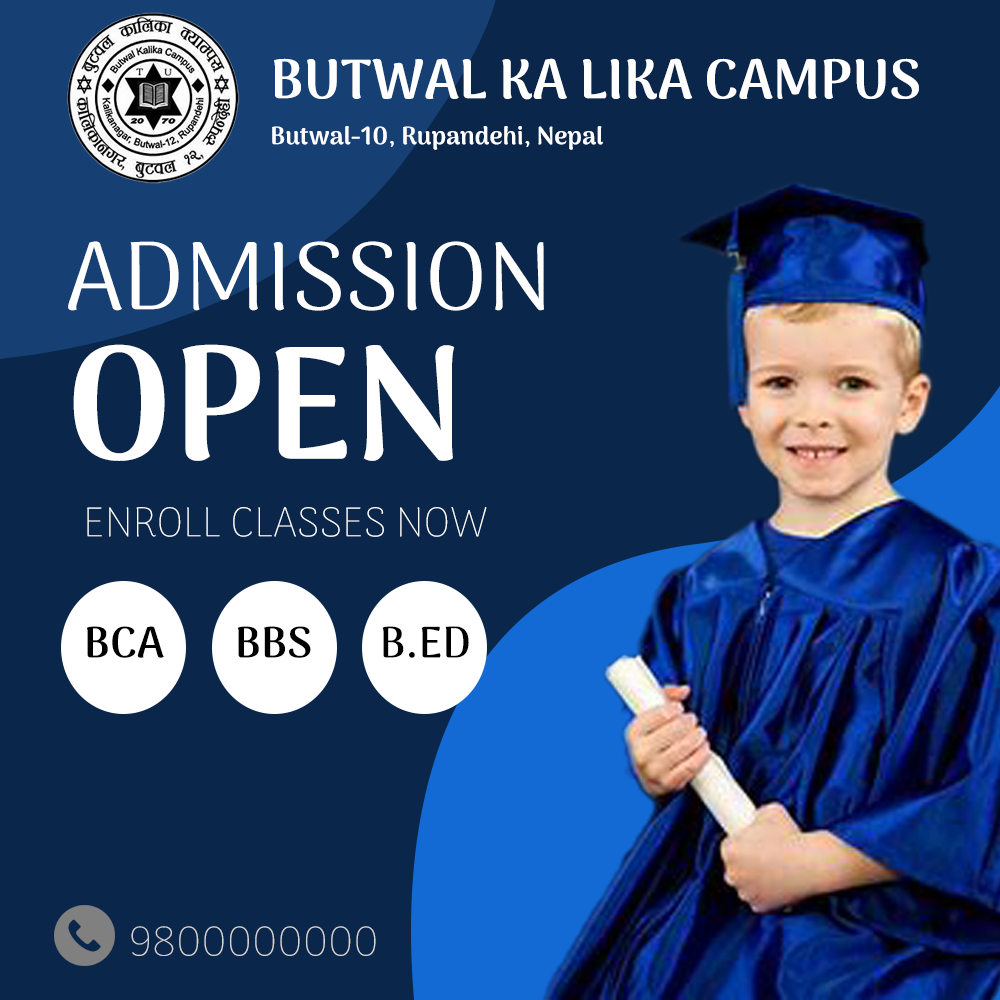
<style>
.page{position:relative;width:1000px;height:1000px;background:#0a274b}
.page>*{position:absolute;margin:0}
.t1{font:25px/45.8px "ArimaMadurai-Black";color:#ffffff}
.t2{font:55.4px/45.8px "ArimaMadurai-Black";color:#ffffff}
.t3{font:95.9px/149.2px "ArimaMadurai-Regular";color:#ffffff}
.t4{font:159.9px/149.2px "ArimaMadurai-Black";color:#ffffff}
.t5{font:41.7px "ArimaMadurai-Thin";color:#ffffff}
.t6{font:44px "ArimaMadurai-ExtraBold";color:#000000}
.t7{font:44px "ArimaMadurai-Bold";color:#000000}
.t8{font:41.7px "ArimaMadurai-Thin";color:#d4d4d4}
</style>
<div class="page">
<p class="t1" style="left:272px;top:58px;width:647px;height:92px"><span class="t2">BUTWAL KA LIKA CAMPUS<br></span>Butwal-10, Rupandehi, Nepal</p>
<p class="t3" style="left:68px;top:241px;width:476px;height:220px">ADMISSION <br><span class="t4">OPEN</span></p>
<p class="t5" style="left:87px;top:507px;width:400px;height:30px">ENROLL CLASSES NOW</p>
<p class="t6" style="left:86px;top:626px;width:78px;height:32px">BCA</p>
<p class="t6" style="left:237px;top:626px;width:74px;height:32px">BBS</p>
<p class="t7" style="left:382px;top:626px;width:87px;height:32px">B.ED</p>
<p class="t8" style="left:131px;top:926px;width:245px;height:30px">9800000000</p>
</div>
